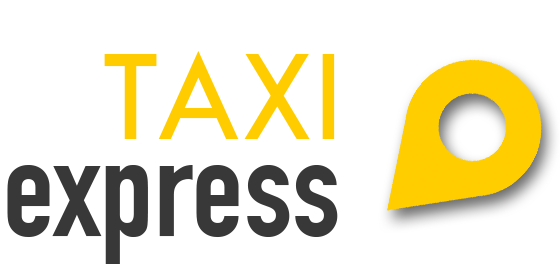
<style>
.page{position:relative;width:560px;height:280px;background:#ffffff}
.page>*{position:absolute;margin:0}
.t1{font:135.7px "TwCenMT-Regular";color:#ffcc00}
.t2{font:138.1px "DINCondensed-Bold";color:#383838}
</style>
<div class="page">
<p class="t1" style="left:104px;top:51px;width:231px;height:88px">TAXI</p>
<p class="t2" style="left:7px;top:165px;width:331px;height:99px">express</p>
</div>
